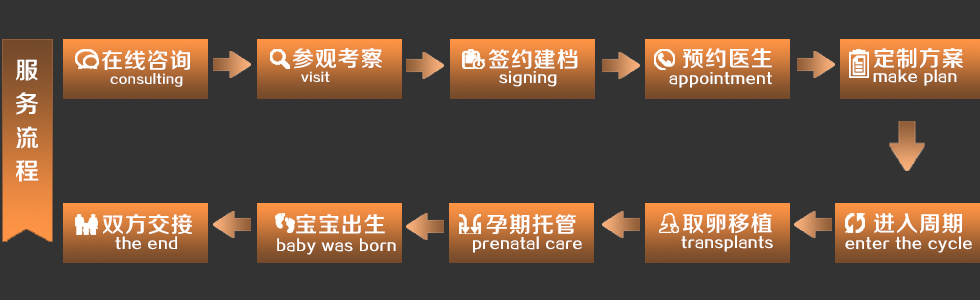
<style>
.page{position:relative;width:980px;height:300px;background:#333333}
.page>*{position:absolute;margin:0}
.t1{font:22px "FZZZHONGJW--GB1-0";letter-spacing:0.04em;color:#ffffff}
.t2{font:24px/30.9px "FZZZHONGJW--GB1-0";letter-spacing:0.04em;color:#ffffff}
.t3{font:12px "FZZZHONGJW--GB1-0";letter-spacing:0.04em;color:#ffffff}
.t4{font:14px "FZZZHONGJW--GB1-0";letter-spacing:0.04em;color:#ffffff}
</style>
<div class="page">
<p class="t1" style="left:102px;top:50px;width:88px;height:20px">在线咨询</p>
<p class="t1" style="left:293px;top:48px;width:89px;height:21px">参观考察</p>
<p class="t1" style="left:489px;top:49px;width:89px;height:20px">签约建档</p>
<p class="t1" style="left:683px;top:48px;width:89px;height:21px">预约医生</p>
<p class="t1" style="left:874px;top:48px;width:89px;height:21px">定制方案</p>
<p class="t2" style="left:16px;top:59px;width:23px;height:123px">服 务 流 程</p>
<p class="t3" style="left:110px;top:73px;width:73px;height:14px">consulting</p>
<p class="t3" style="left:301px;top:71px;width:29px;height:11px">visit</p>
<p class="t4" style="left:499px;top:71px;width:58px;height:16px">signing</p>
<p class="t4" style="left:669px;top:72px;width:103px;height:16px">appointment</p>
<p class="t4" style="left:873px;top:69px;width:84px;height:17px">make plan</p>
<p class="t1" style="left:103px;top:214px;width:89px;height:20px">双方交接</p>
<p class="t1" style="left:296px;top:214px;width:89px;height:20px">宝宝出生</p>
<p class="t1" style="left:486px;top:214px;width:90px;height:21px">孕期托管</p>
<p class="t1" style="left:683px;top:213px;width:89px;height:21px">取卵移植</p>
<p class="t1" style="left:874px;top:213px;width:88px;height:21px">进入周期</p>
<p class="t4" style="left:115px;top:236px;width:62px;height:14px">the end</p>
<p class="t4" style="left:277px;top:238px;width:119px;height:17px">baby was born</p>
<p class="t4" style="left:473px;top:236px;width:109px;height:17px">prenatal care</p>
<p class="t4" style="left:681px;top:235px;width:92px;height:17px">transplants</p>
<p class="t4" style="left:845px;top:236px;width:127px;height:17px">enter the cycle</p>
</div>
